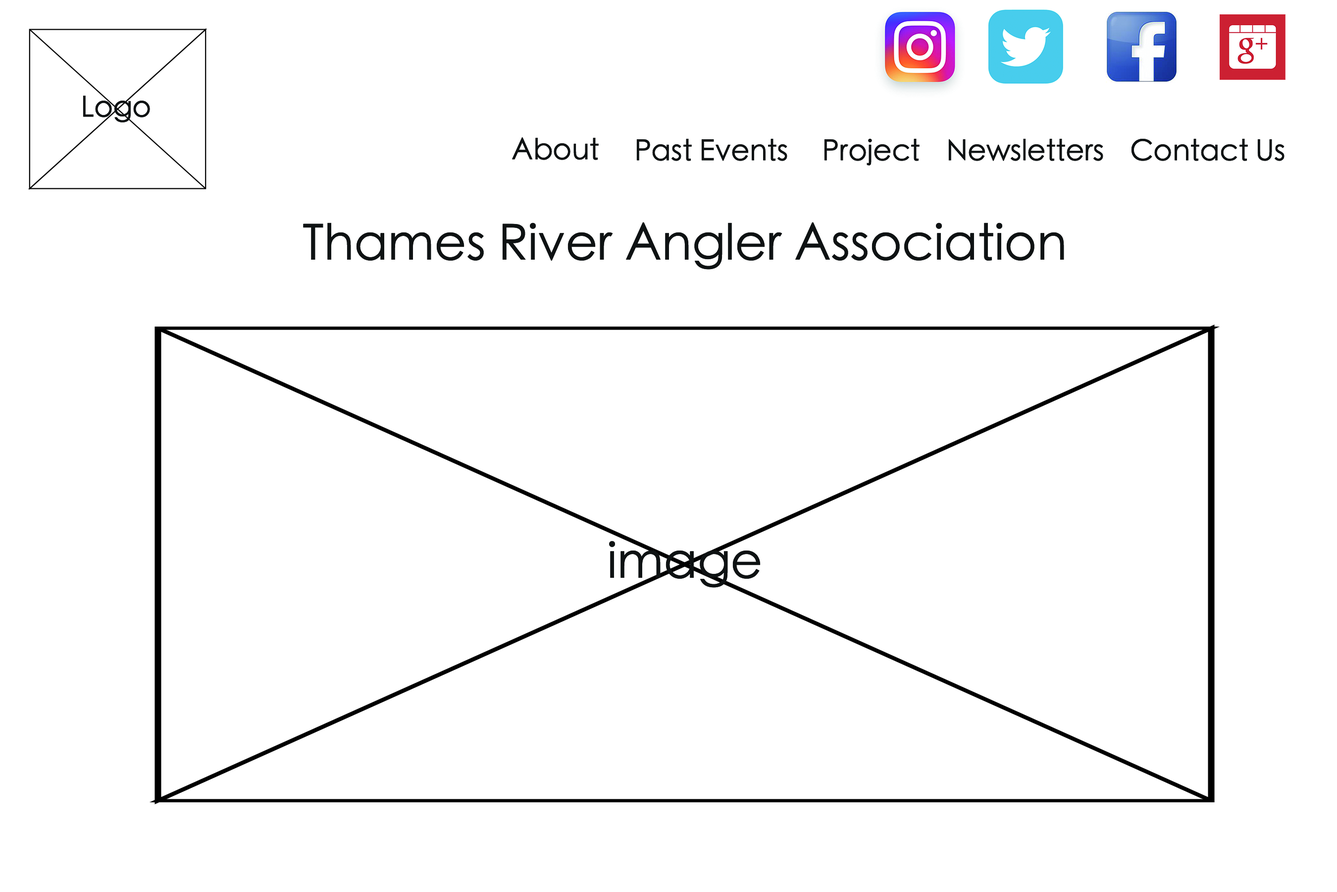
<style>
.page{position:relative;width:1337px;height:892px;background:#ffffff}
.page>*{position:absolute;margin:0}
.t1{font:28.9px "STHeitiSC-Light";color:#0e1213}
.t2{font:49.5px "STHeitiSC-Light";color:#0e1213}
</style>
<div class="page">
<p class="t1" style="left:83px;top:96px;width:67px;height:26px">Logo</p>
<p class="t1" style="left:512px;top:137px;width:87px;height:23px">About</p>
<p class="t1" style="left:637px;top:139px;width:151px;height:22px">Past Events</p>
<p class="t1" style="left:824px;top:139px;width:96px;height:26px">Project</p>
<p class="t1" style="left:949px;top:139px;width:155px;height:22px">Newsletters</p>
<p class="t1" style="left:1131px;top:139px;width:154px;height:22px">Contact Us</p>
<p class="t2" style="left:303px;top:222px;width:761px;height:47px">Thames River Angler Association</p>
<p class="t2" style="left:609px;top:540px;width:152px;height:47px">image</p>
</div>
